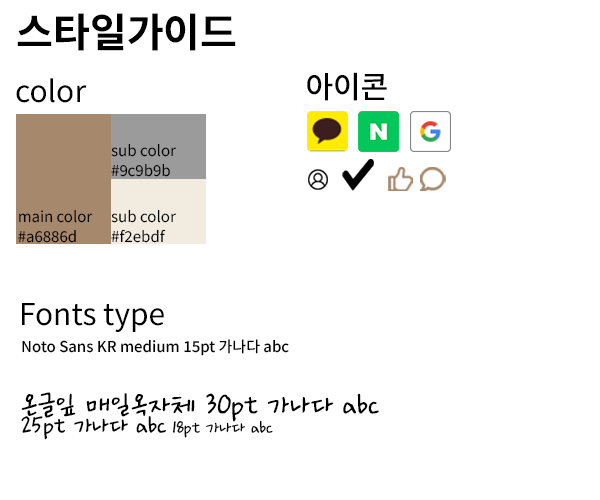
<style>
.page{position:relative;width:600px;height:500px;background:#ffffff}
.page>*{position:absolute;margin:0}
.t1{font:40px "NotoSansKR-Bold";color:#000000}
.t2{font:30px "NotoSansKR-Regular";color:#000000}
.t3{font:30.2px "NotoSansKR-Medium";color:#000000}
.t4{font:15px/20px "NotoSansKR-Regular";color:#000000}
.t5{font:15px/19.9px "NotoSansKR-Regular";color:#000000}
.t6{font:30.1px "NotoSansKR-Regular";color:#000000}
.t7{font:15px "NotoSansKR-Medium";color:#000000}
.t8{font:30px "Ownglyph_Dailyokja-Rg";color:#000000}
.t9{font:25px "Ownglyph_Dailyokja-Rg";color:#000000}
.t10{font:18px "Ownglyph_Dailyokja-Rg";color:#000000}
</style>
<div class="page">
<p class="t1" style="left:17px;top:13px;width:219px;height:38px">스타일가이드</p>
<p class="t2" style="left:16px;top:78px;width:71px;height:25px">color</p>
<p class="t3" style="left:307px;top:72px;width:80px;height:29px">아이콘</p>
<p class="t4" style="left:111px;top:143px;width:65px;height:34px">sub color<br>#9c9b9b</p>
<p class="t5" style="left:111px;top:209px;width:65px;height:34px">sub color<br>#f2ebdf</p>
<p class="t4" style="left:18px;top:210px;width:74px;height:33px">main color<br>#a6886d</p>
<p class="t6" style="left:22px;top:303px;width:142px;height:29px">Fonts type</p>
<p class="t7" style="left:22px;top:339px;width:267px;height:17px">Noto Sans KR medium 15pt 가나다 abc</p>
<p class="t8" style="left:21px;top:392px;width:358px;height:30px">온글잎 매일옥자체 30pt 가나다 abc</p>
<p class="t9" style="left:21px;top:416px;width:252px;height:24px">25pt 가나다 abc <span class="t10">18pt 가나다 abc</span></p>
</div>
